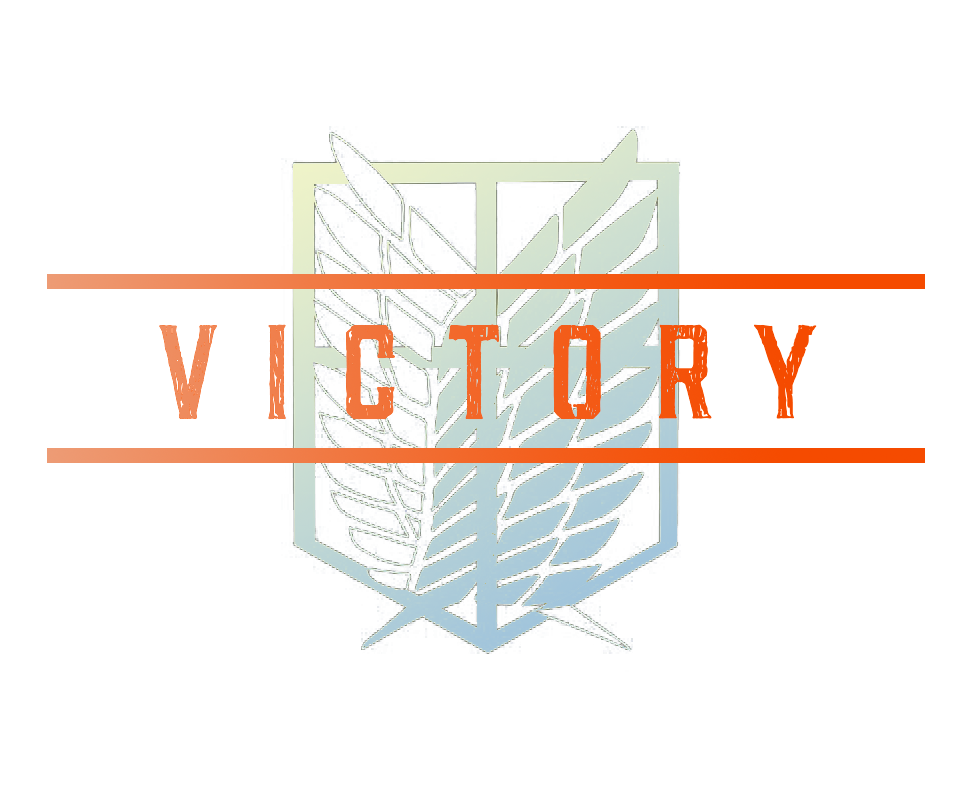
<style>
.page{position:relative;width:980px;height:793px;background:#ffffff}
.page>*{position:absolute;margin:0}
.t1{font:120px "WoodHellCompany";letter-spacing:0.44em}
</style>
<div class="page">
<p class="t1" style="left:159px;top:324px;width:658px;height:96px">victory</p>
</div>
